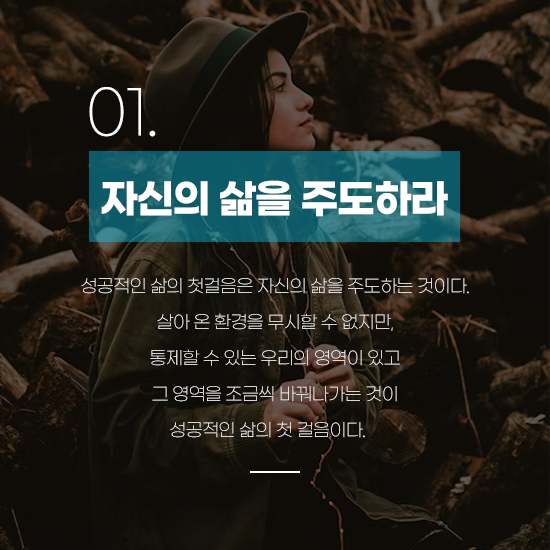
<style>
.page{position:relative;width:550px;height:550px}
.page>*{position:absolute;margin:0}
.t1{font:60.1px "GmarketSansLight";letter-spacing:-0.05em;color:#ffffff}
.t2{font:40.1px "GmarketSansBold";letter-spacing:-0.05em;color:#ffffff}
.t3{font:18px/36px "GmarketSansLight";letter-spacing:-0.05em;color:#ffffff}
</style>
<div class="page">
<p class="t1" style="left:89px;top:87px;width:67px;height:50px">01.</p>
<p class="t2" style="left:101px;top:180px;width:347px;height:37px">자신의 삶을 주도하라</p>
<p class="t3" style="left:81px;top:277px;width:388px;height:161px;text-align:center">성공적인 삶의 첫걸음은 자신의 삶을 주도하는 것이다.<br>살아 온 환경을 무시할 수 없지만,<br>통제할 수 있는 우리의 영역이 있고<br>그 영역을 조금씩 바꿔나가는 것이<br>성공적인 삶의 첫 걸음이다.</p>
</div>
